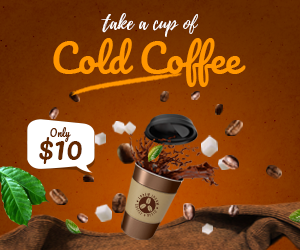
<style>
.page{position:relative;width:300px;height:250px}
.page>*{position:absolute;margin:0}
.t1{font:19.6px "Playlist-Script";color:#ffffff}
.t2{font:39.3px "Pacifico-Regular";color:#ff9600}
.t3{font:31.4px "Pacifico-Regular";color:#622700}
.t4{font:9.4px "Pacifico-Regular";color:#622700}
</style>
<div class="page">
<p class="t1" style="left:101px;top:13px;width:97px;height:24px">take a cup of</p>
<p class="t2" style="left:53px;top:38px;width:193px;height:49px">Cold Coffee</p>
<p class="t3" style="left:39px;top:137px;width:43px;height:27px">$10</p>
<p class="t4" style="left:50px;top:127px;width:21px;height:15px">Only</p>
</div>
